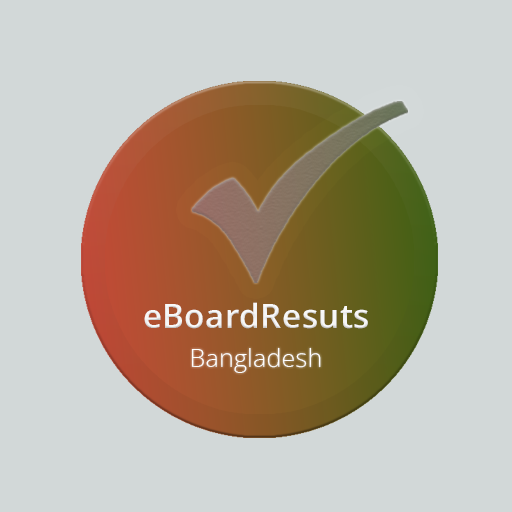
<style>
.page{position:relative;width:512px;height:512px;background:#d2d8d8}
.page>*{position:absolute;margin:0}
.t1{font:33.3px "OpenSansRoman-SemiBold";letter-spacing:0.01em;color:#ffffff}
.t2{font:25px "OpenSansRoman-Light";letter-spacing:0.01em;color:#ffffff}
</style>
<div class="page">
<p class="t1" style="left:144px;top:302px;width:224px;height:27px">eBoardResuts</p>
<p class="t2" style="left:191px;top:347px;width:130px;height:26px">Bangladesh</p>
</div>
